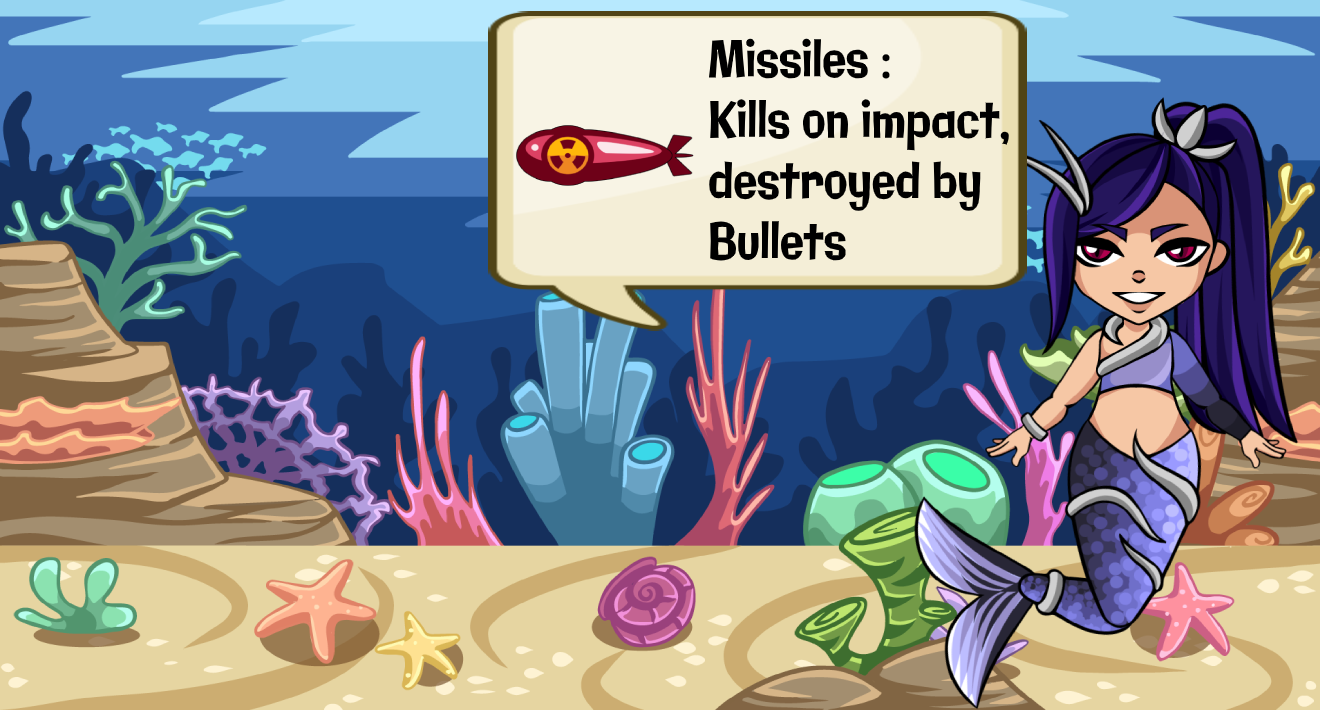
<style>
.page{position:relative;width:1320px;height:710px}
.page>*{position:absolute;margin:0}
.t1{font:50.5px "Galindo-Regular";color:#000000;scale:0.77 1}
</style>
<div class="page">
<p class="t1" style="left:708px;top:38px;width:301px;height:223px">Missiles : <br>Kills on impact,<br>destroyed by <br>Bullets</p>
</div>
